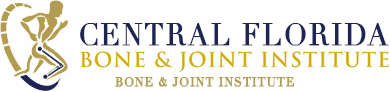
<style>
.page{position:relative;width:390px;height:92px;background:#fefefe}
.page>*{position:absolute;margin:0}
.t1{font:30.7px "Didot";letter-spacing:0.05em;color:#1e2454;font-weight:bold;scale:0.91 1}
.t2{font:12px "Didot";letter-spacing:0.05em;color:#b19c52;font-weight:bold}
</style>
<div class="page">
<p class="t1" style="left:80px;top:23px;width:309px;height:23px">CENTRAL FLORIDA</p>
<p class="t2" style="left:115px;top:77px;width:179px;height:10px">BONE &amp; JOINT INSTITUTE</p>
</div>
